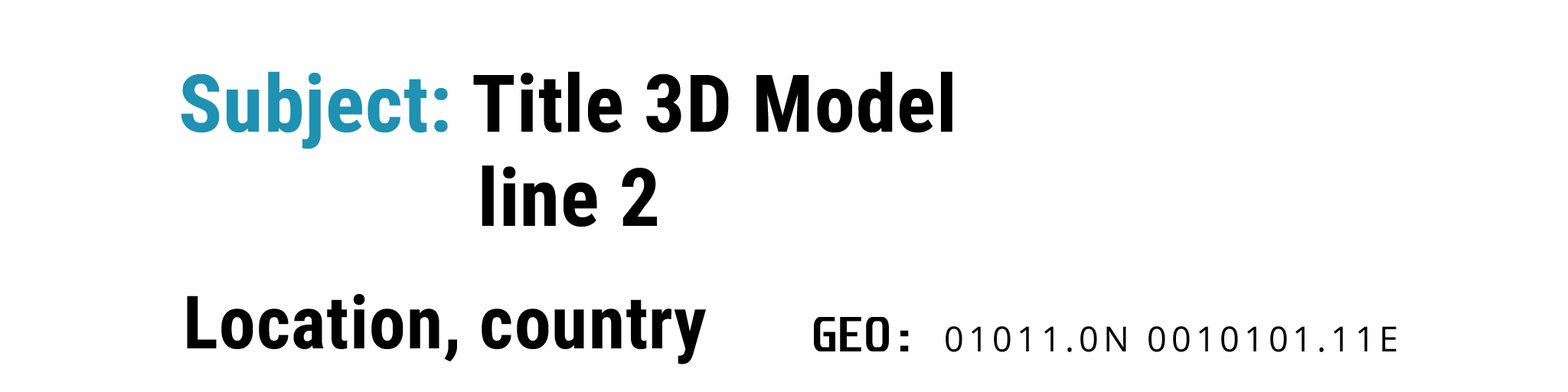
<style>
.page{position:relative;width:1568px;height:392px;background:#ffffff}
.page>*{position:absolute;margin:0}
.t1{font:79.7px "RobotoCondensed-Bold";letter-spacing:0.01em;color:#000000}
.t2{font:79.7px "RobotoCondensed-Bold";letter-spacing:0.01em;color:#1f91b2}
.t3{font:80.4px "RobotoCondensed-Bold";letter-spacing:0.01em;color:#000000}
.t4{font:73.5px "RobotoCondensed-Bold";letter-spacing:0.01em;color:#000000}
.t5{font:34.6px "OpenSans-Regular";letter-spacing:0.13em;color:#000000}
.t6{font:42.7px "Unispace-Bold";letter-spacing:0.01em;color:#000000}
</style>
<div class="page">
<p class="t1" style="left:181px;top:71px;width:771px;height:78px"><span class="t2">Subject: </span>Title 3D Model</p>
<p class="t3" style="left:482px;top:165px;width:175px;height:62px">line 2</p>
<p class="t4" style="left:187px;top:294px;width:519px;height:70px">Location, country</p>
<p class="t5" style="left:814px;top:317px;width:582px;height:35px"><span class="t6"> GEO: </span>01011.0N 0010101.11E</p>
</div>
